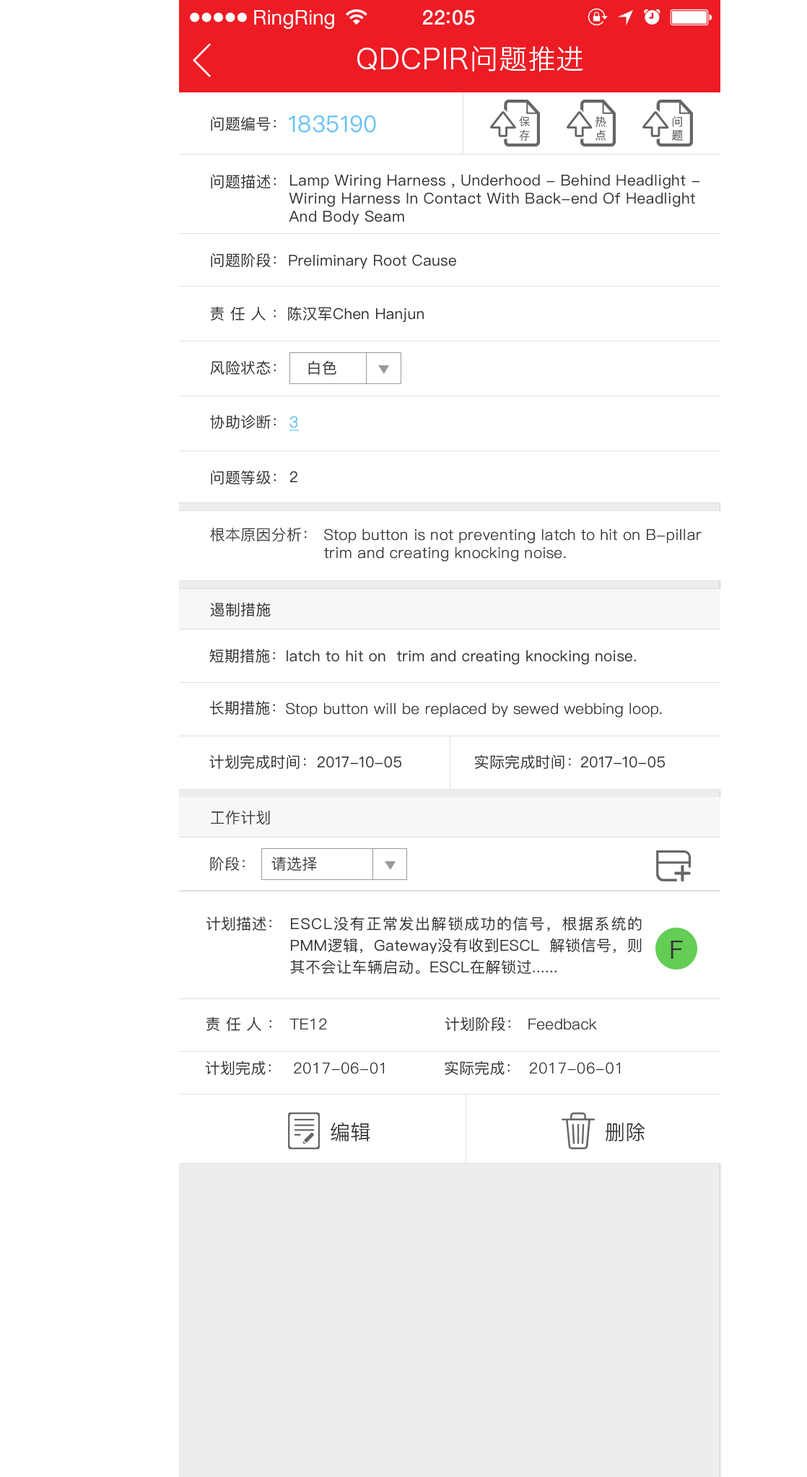
<style>
.page{position:relative;width:807px;height:1477px;background:#ffffff}
.page>*{position:absolute;margin:0}
.t1{font:20.3px "HelveticaNeue";color:#ffffff}
.t2{font:20.3px "HelveticaNeue-Medium";letter-spacing:0.03em;color:#ffffff}
.t3{font:27.9px "HiraginoSansGB-W3";letter-spacing:0.01em;color:#ffffff}
.t4{font:15.2px "PingFangSC-Regular";letter-spacing:0.01em;color:#333333}
.t5{font:23.1px "PingFangSC-Regular";letter-spacing:0.01em;color:#66c2f6}
.t6{font:15.2px "PingFangSC-Regular";letter-spacing:0.35em;color:#333333}
.t7{font:15.2px "PingFang-SC-Regular";letter-spacing:0.01em;color:#47b4f9;text-decoration:underline}
.t8{font:15.2px "PingFang-SC-Regular";letter-spacing:0.01em;color:#333333}
.t9{font:15.2px/21.7px "PingFangSC-Regular";letter-spacing:0.01em;color:#333333}
.t10{font:23.4px "HiraginoSansGB-W3";letter-spacing:0.01em;color:#333333}
.t11{font:20.2px "PingFang-SC-Regular";letter-spacing:0.01em;color:#333333}
</style>
<div class="page">
<p class="t1" style="left:254px;top:10px;width:80px;height:19px">RingRing</p>
<p class="t2" style="left:422px;top:9px;width:53px;height:16px">22 05</p>
<p class="t3" style="left:357px;top:45px;width:226px;height:26px">QDCPIR问题推进进</p>
<p class="t4" style="left:211px;top:116px;width:65px;height:15px">问题编号：</p>
<p class="t5" style="left:289px;top:115px;width:87px;height:18px">1835190</p>
<p class="t4" style="left:211px;top:174px;width:65px;height:15px">问题描述：</p>
<p class="t4" style="left:289px;top:174px;width:411px;height:51px">Lamp Wiring Harness , Underhood - Behind Headlight - Wiring Harness In Contact With Back-end Of Headlight And Body Seam</p>
<p class="t4" style="left:211px;top:253px;width:65px;height:15px">问题阶段：</p>
<p class="t4" style="left:289px;top:254px;width:167px;height:15px">Preliminary Root Cause</p>
<p class="t6" style="left:210px;top:306px;width:66px;height:15px">责任人：</p>
<p class="t4" style="left:288px;top:306px;width:136px;height:17px">陈汉军Chen Hanjun</p>
<p class="t4" style="left:210px;top:360px;width:66px;height:15px">风险状态：</p>
<p class="t4" style="left:308px;top:360px;width:28px;height:15px">白色</p>
<p class="t4" style="left:210px;top:414px;width:66px;height:16px">协助诊断：</p>
<p class="t7" style="left:289px;top:416px;width:11px;height:15px">3</p>
<p class="t4" style="left:211px;top:470px;width:65px;height:15px">问题等级：</p>
<p class="t4" style="left:290px;top:471px;width:7px;height:11px">2</p>
<p class="t8" style="left:210px;top:527px;width:97px;height:15px">根本原因分析：</p>
<p class="t8" style="left:324px;top:529px;width:378px;height:33px">Stop button is not preventing latch to hit on B-pillar trim and creating knocking noise.</p>
<p class="t4" style="left:210px;top:602px;width:61px;height:15px">遏制措施</p>
<p class="t4" style="left:209px;top:648px;width:66px;height:15px">短期措施：</p>
<p class="t4" style="left:287px;top:650px;width:349px;height:15px">latch to hit on  trim and creating knocking noise.</p>
<p class="t4" style="left:209px;top:700px;width:66px;height:15px">长期措施：</p>
<p class="t8" style="left:286px;top:703px;width:376px;height:15px">Stop button will be replaced by sewed webbing loop.</p>
<p class="t4" style="left:209px;top:755px;width:97px;height:15px">计划完成时间：</p>
<p class="t4" style="left:317px;top:756px;width:84px;height:12px">2017-10-05</p>
<p class="t4" style="left:475px;top:755px;width:96px;height:15px">实际完成时间：</p>
<p class="t4" style="left:580px;top:756px;width:85px;height:12px">2017-10-05</p>
<p class="t8" style="left:211px;top:810px;width:59px;height:15px">工作计划</p>
<p class="t8" style="left:210px;top:857px;width:35px;height:14px">阶段：</p>
<p class="t8" style="left:271px;top:856px;width:46px;height:15px">请选择</p>
<p class="t4" style="left:206px;top:916px;width:65px;height:15px">计划描述：</p>
<p class="t9" style="left:290px;top:916px;width:352px;height:59px;text-align:justify">ESCL没有正常发出解锁成功的信号，根据系统的PMM逻辑，Gateway没有收到ESCL 解锁信号，则其不会让车辆启动。ESCL在解锁过......</p>
<p class="t10" style="left:671px;top:941px;width:12px;height:18px">F</p>
<p class="t6" style="left:206px;top:1017px;width:65px;height:15px">责任人：</p>
<p class="t8" style="left:290px;top:1018px;width:37px;height:12px">TE12</p>
<p class="t4" style="left:445px;top:1017px;width:65px;height:15px">计划阶段：</p>
<p class="t8" style="left:529px;top:1018px;width:68px;height:12px">Feedback</p>
<p class="t4" style="left:205px;top:1061px;width:66px;height:15px">计划完成：</p>
<p class="t4" style="left:445px;top:1061px;width:65px;height:15px">实际完成：</p>
<p class="t8" style="left:294px;top:1062px;width:90px;height:12px">2017-06-01</p>
<p class="t8" style="left:530px;top:1062px;width:90px;height:12px">2017-06-01</p>
<p class="t11" style="left:331px;top:1123px;width:39px;height:18px">编辑</p>
<p class="t11" style="left:606px;top:1123px;width:39px;height:18px">删除</p>
</div>
